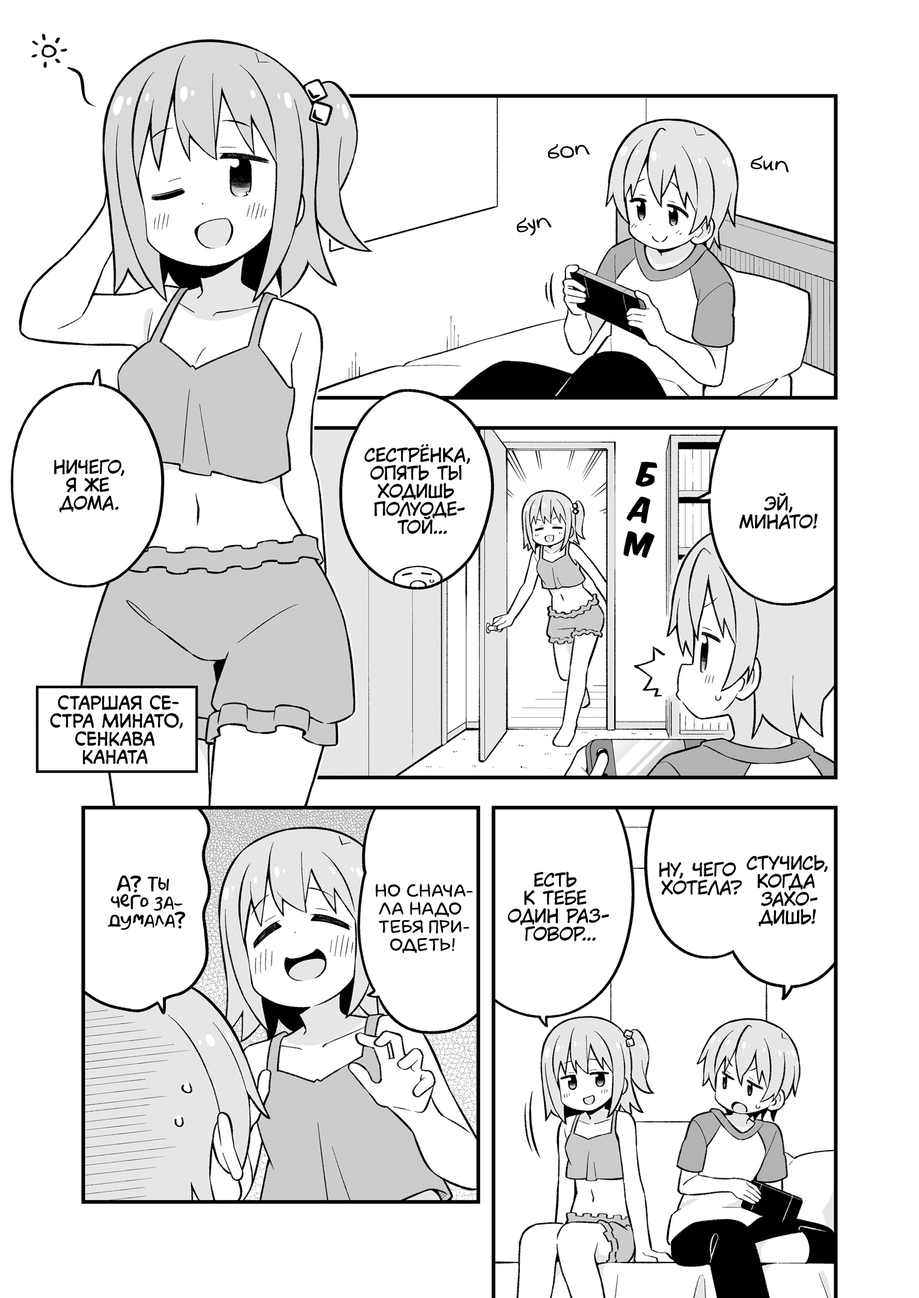
<style>
.page{position:relative;width:919px;height:1298px;background:#ffffff}
.page>*{position:absolute;margin:0}
.t1{font:21.6px "v_Augie";color:#000000}
.t2{font:18px "KuraiVoice2";color:#000000;text-transform:uppercase}
.t3{font:28.8px "KomikaTitle-AxisRUS-LAT";color:#000000;text-transform:uppercase}
.t4{font:18px "v_CCMonologous";color:#000000;text-transform:uppercase}
.t5{font:18px "AkbarPlain";color:#000000}
.t6{font:18px "laCartoonerie";color:#000000;text-transform:uppercase}
</style>
<div class="page">
<p class="t1" style="left:547px;top:144px;width:42px;height:15px;rotate:-8deg">боп</p>
<p class="t1" style="left:750px;top:155px;width:38px;height:17px;rotate:4deg">бип</p>
<p class="t1" style="left:516px;top:217px;width:36px;height:19px;rotate:-11deg">буп</p>
<p class="t2" style="left:364px;top:444px;width:106px;height:90px;text-align:center">Сестрёнка,<br>опять ты<br>ходишь<br>полуоде-<br>той...</p>
<p class="t2" style="left:54px;top:459px;width:70px;height:54px;text-align:center">Ничего,<br>я же<br>дома.</p>
<p class="t3" style="left:635px;top:461px;width:22px;height:26px;rotate:10deg">б</p>
<p class="t3" style="left:626px;top:496px;width:24px;height:27px;rotate:9deg">а</p>
<p class="t2" style="left:739px;top:492px;width:79px;height:37px;text-align:center">Эй,<br>Минато!</p>
<p class="t3" style="left:623px;top:531px;width:31px;height:27px;rotate:5deg">м</p>
<p class="t4" style="left:50px;top:695px;width:133px;height:69px;text-align:center">Старшая се-<br>стра Минато,<br>Сенкава<br>Каната</p>
<p class="t2" style="left:746px;top:854px;width:81px;height:73px;text-align:center">Стучись,<br>когда<br>захо-<br>дишь!</p>
<p class="t2" style="left:659px;top:862px;width:83px;height:33px;text-align:center">Ну, чего<br>хотела?</p>
<p class="t5" style="left:108px;top:875px;width:78px;height:55px;text-align:center">А? Ты<br>чего за-<br>думала?</p>
<p class="t2" style="left:508px;top:871px;width:101px;height:71px;text-align:center">Есть<br>к тебе<br>один раз-<br>говор...</p>
<p class="t6" style="left:376px;top:883px;width:97px;height:70px;text-align:center">Но снача-<br>ла надо<br>тебя при-<br>одеть!</p>
</div>
